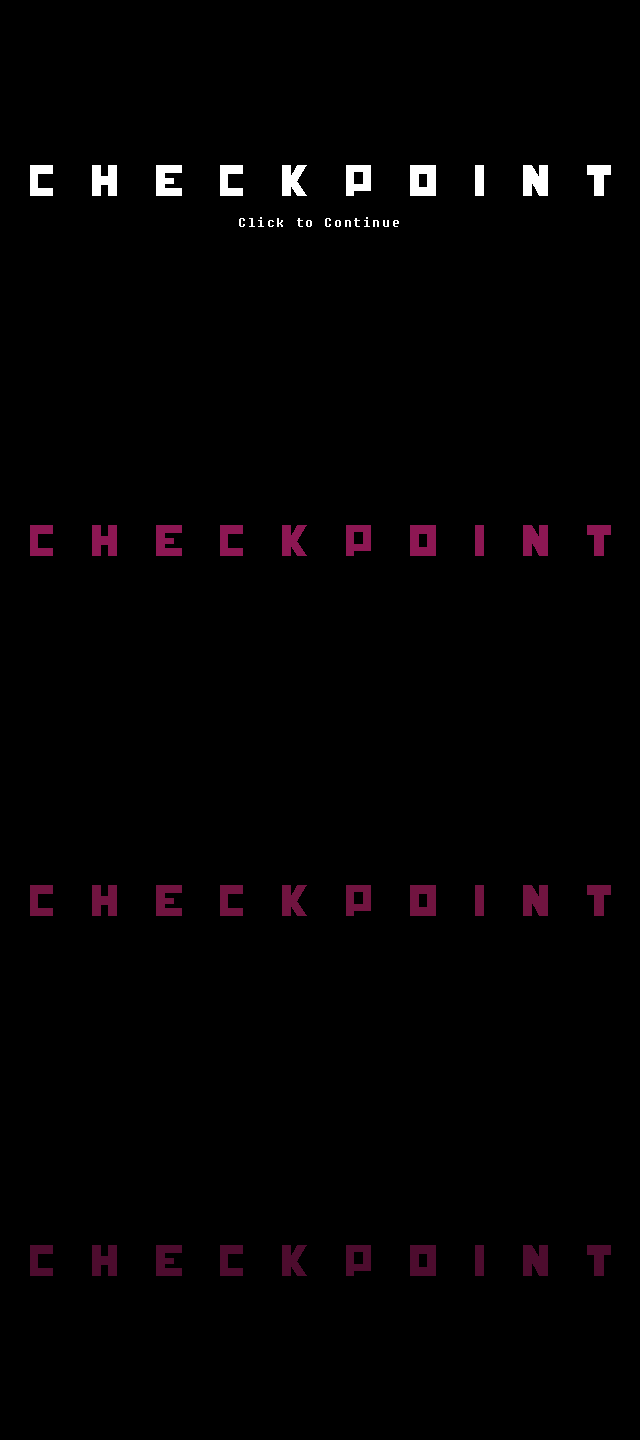
<style>
.page{position:relative;width:640px;height:1440px;background:#000000}
.page>*{position:absolute;margin:0}
.t1{font:41px "HungerGames";letter-spacing:0.86em;color:#ffffff}
.t2{font:8px "Fixedsys";letter-spacing:0.2em;color:#ffffff}
.t3{font:41px "HungerGames";letter-spacing:0.86em;color:#8d1753}
.t4{font:41px "HungerGames";letter-spacing:0.86em;color:#711440}
.t5{font:41px "HungerGames";letter-spacing:0.86em;color:#4d0c2e}
</style>
<div class="page">
<p class="t1" style="left:30px;top:165px;width:581px;height:31px">Checkpoint</p>
<p class="t2" style="left:239px;top:217px;width:160px;height:10px">Click to Continue</p>
<p class="t3" style="left:30px;top:525px;width:581px;height:31px">Checkpoint</p>
<p class="t4" style="left:30px;top:885px;width:581px;height:31px">Checkpoint</p>
<p class="t5" style="left:30px;top:1245px;width:581px;height:31px">Checkpoint</p>
</div>
